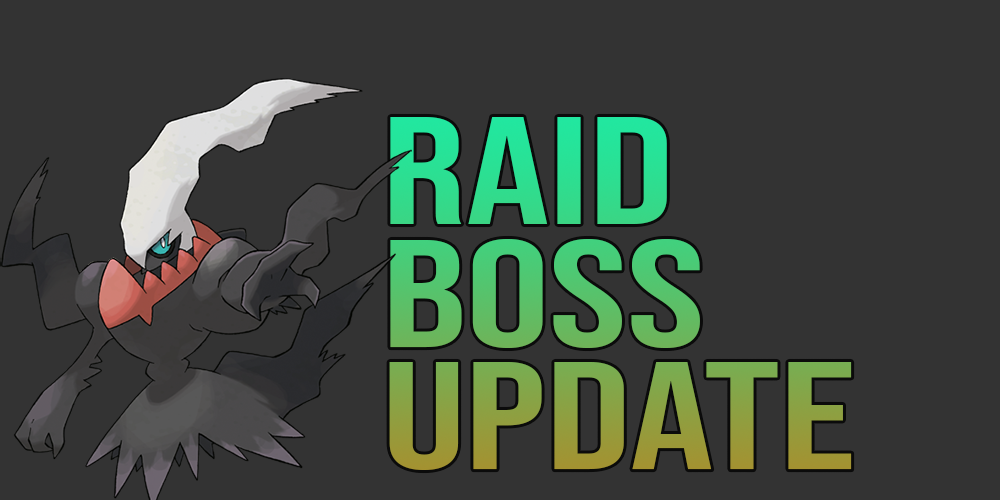
<style>
.page{position:relative;width:1000px;height:500px;background:#333333}
.page>*{position:absolute;margin:0}
.t1{font:152.8px/122.7px "BebasNeue-Regular";scale:1.36 1}
</style>
<div class="page">
<p class="t1" style="left:389px;top:117px;width:463px;height:353px">Raid<br>boss<br>update</p>
</div>
